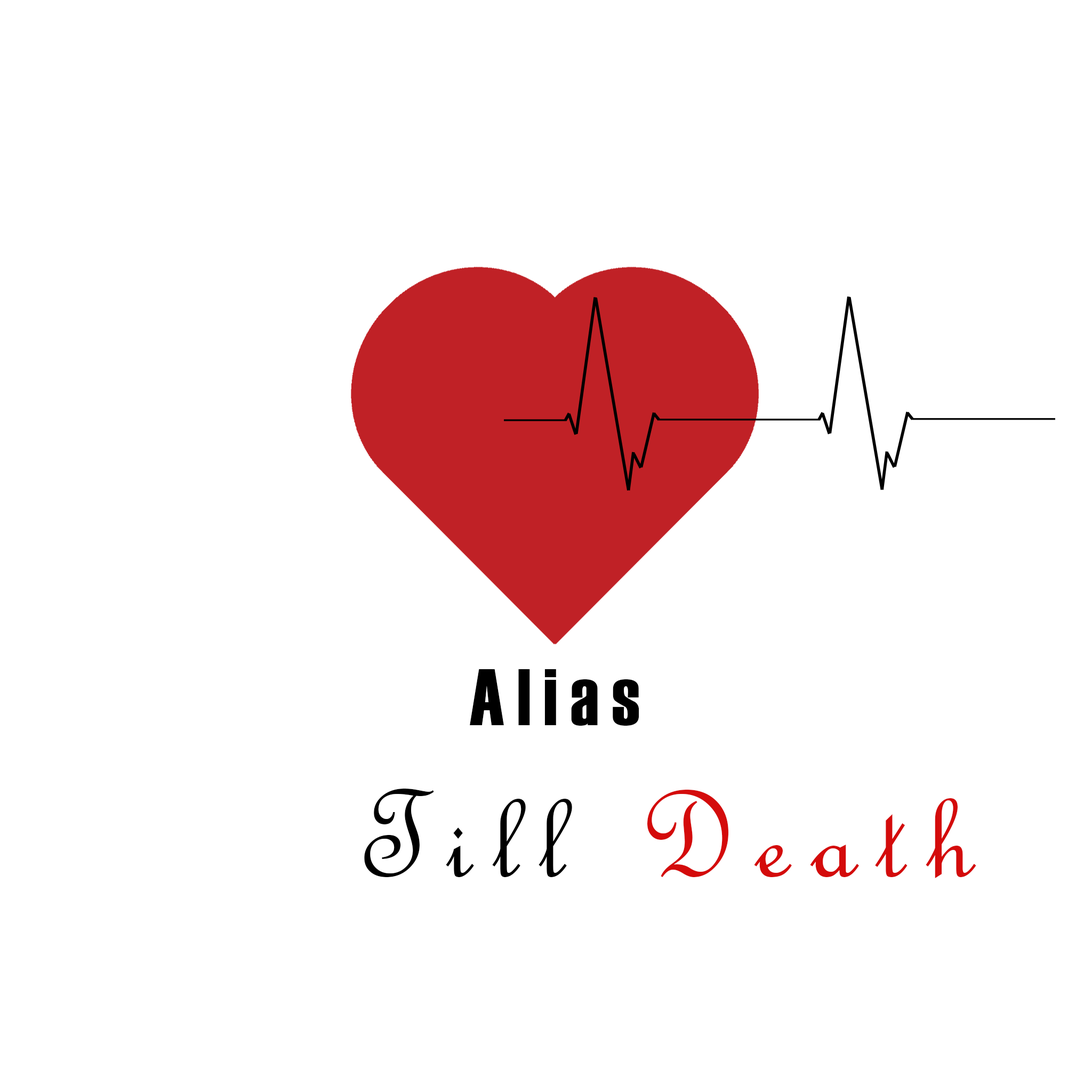
<style>
.page{position:relative;width:1092px;height:1092px;background:#ffffff}
.page>*{position:absolute;margin:0}
.t1{font:80px "Haettenschweiler";letter-spacing:0.16em;color:#000000}
.t2{font:133.3px "FrenchScriptMT";letter-spacing:0.16em;color:#d40b0b}
.t3{font:133.3px "FrenchScriptMT";letter-spacing:0.16em;color:#000000}
</style>
<div class="page">
<p class="t1" style="left:470px;top:669px;width:169px;height:57px">Alias</p>
<p class="t2" style="left:364px;top:789px;width:612px;height:89px"><span class="t3">Till </span>Death</p>
</div>
